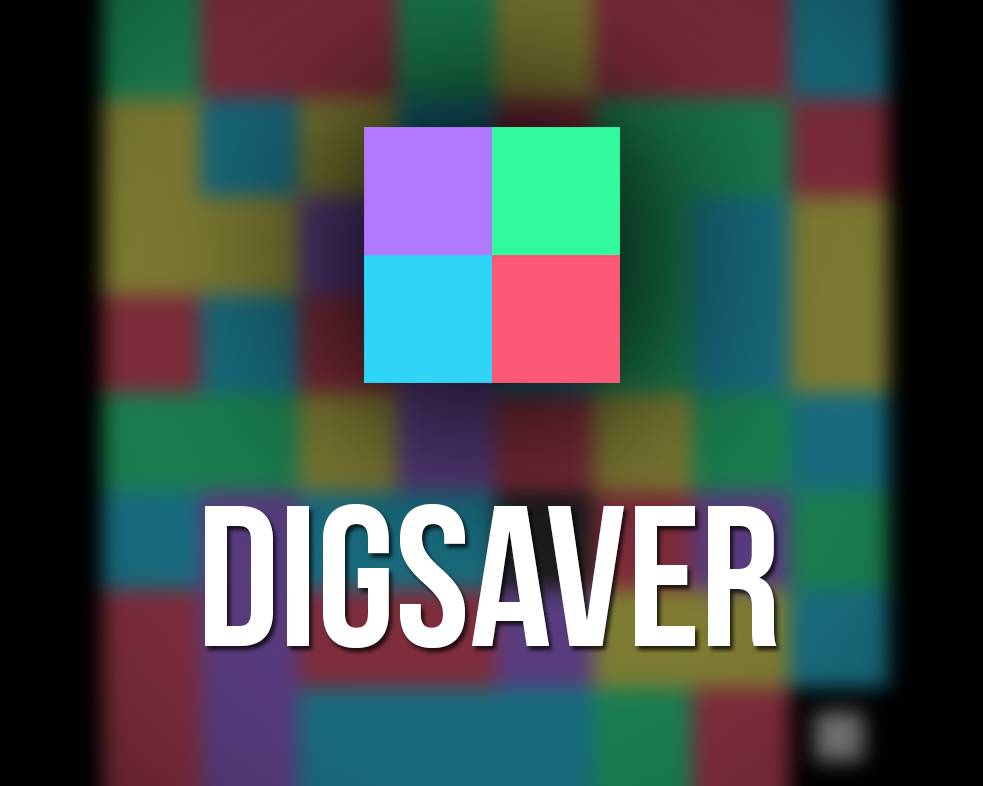
<style>
.page{position:relative;width:983px;height:786px}
.page>*{position:absolute;margin:0}
.t1{font:200px "BebasNeue";color:#ffffff}
</style>
<div class="page">
<p class="t1" style="left:205px;top:504px;width:572px;height:144px">Digsaver</p>
</div>
